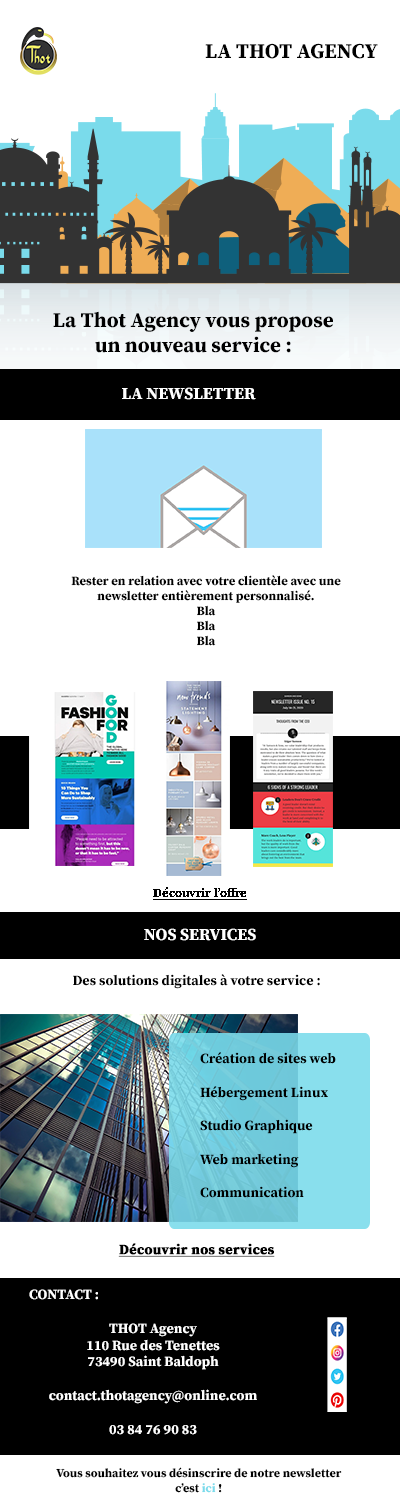
<style>
.page{position:relative;width:400px;height:1501px;background:#ffffff}
.page>*{position:absolute;margin:0}
.t1{font:20.9px "SourceSerifPro-Bold";color:#000000}
.t2{font:16.8px "SourceSerifPro-Bold";color:#ffffff}
.t3{font:12.6px "SourceSerifPro-Bold";color:#000000}
.t4{font:12.6px "SourceSerifPro-Bold";color:#000000;text-decoration:underline}
.t5{font:14px "SourceSerifPro-Bold";color:#000000}
.t6{font:14px "SourceSerifPro-Bold";color:#000000;font-weight:bold;text-decoration:underline}
.t7{font:14px "SourceSerifPro-Bold";color:#ffffff}
.t8{font:12px "SourceSerifPro-Bold";color:#000000}
.t9{font:12px "SourceSerifPro-Bold";color:#7adbeb}
</style>
<div class="page">
<p class="t1" style="left:205px;top:43px;width:173px;height:16px">LA THOT AGENCY</p>
<p class="t2" style="left:122px;top:387px;width:134px;height:13px">LA NEWSLETTER</p>
<p class="t3" style="left:71px;top:575px;width:270px;height:71px;text-align:center">Rester en relation avec votre clientèle avec une newsletter entièrement personnalisé.<br>Bla<br>Bla<br>Bla</p>
<p class="t4" style="left:153px;top:887px;width:94px;height:13px">Découvrir l’offre</p>
<p class="t2" style="left:144px;top:928px;width:112px;height:13px">NOS SERVICES</p>
<p class="t5" style="left:73px;top:974px;width:247px;height:15px">Des solutions digitales à votre service :</p>
<p class="t5" style="left:200px;top:1052px;width:136px;height:146px">Création de sites web<br><br>Hébergement Linux<br><br>Studio Graphique<br><br>Web marketing<br><br>Communication</p>
<p class="t6" style="left:118px;top:1243px;width:157px;height:14px">Découvrir nos services</p>
<p class="t7" style="left:29px;top:1289px;width:228px;height:146px">CONTACT :<br><br>THOT Agency<br>110 Rue des Tenettes<br>73490 Saint Baldoph<br><br>contact.thotagency@online.com<br><br>03 84 76 90 83</p>
<p class="t8" style="left:56px;top:1467px;width:286px;height:26px;text-align:center">Vous souhaitez vous désinscrire de notre newsletter<br>c’est <span class="t9">ici</span> !</p>
</div>
